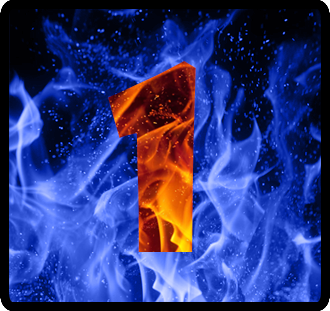
<style>
.page{position:relative;width:330px;height:311px}
.page>*{position:absolute;margin:0}
.t1{font:244.6px "ShowcardGothic-Reg"}
</style>
<div class="page">
<p class="t1" style="left:108px;top:61px;width:88px;height:191px">1</p>
</div>
